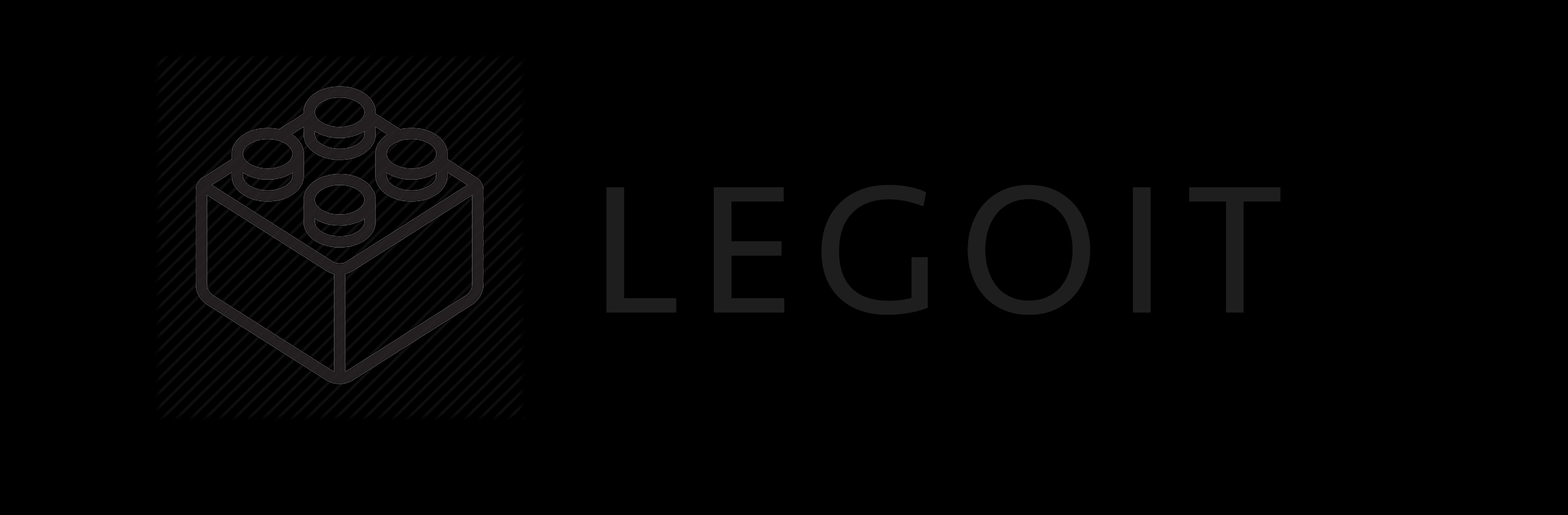
<style>
.page{position:relative;width:1568px;height:515px;background:#000000}
.page>*{position:absolute;margin:0}
.t1{font:187.8px "Seravek";letter-spacing:0.1em;color:#1e1e1e}
</style>
<div class="page">
<p class="t1" style="left:606px;top:185px;width:674px;height:130px">LEGOIT</p>
<p class="t1" style="left:606px;top:185px;width:674px;height:130px">LEGOIT</p>
</div>
